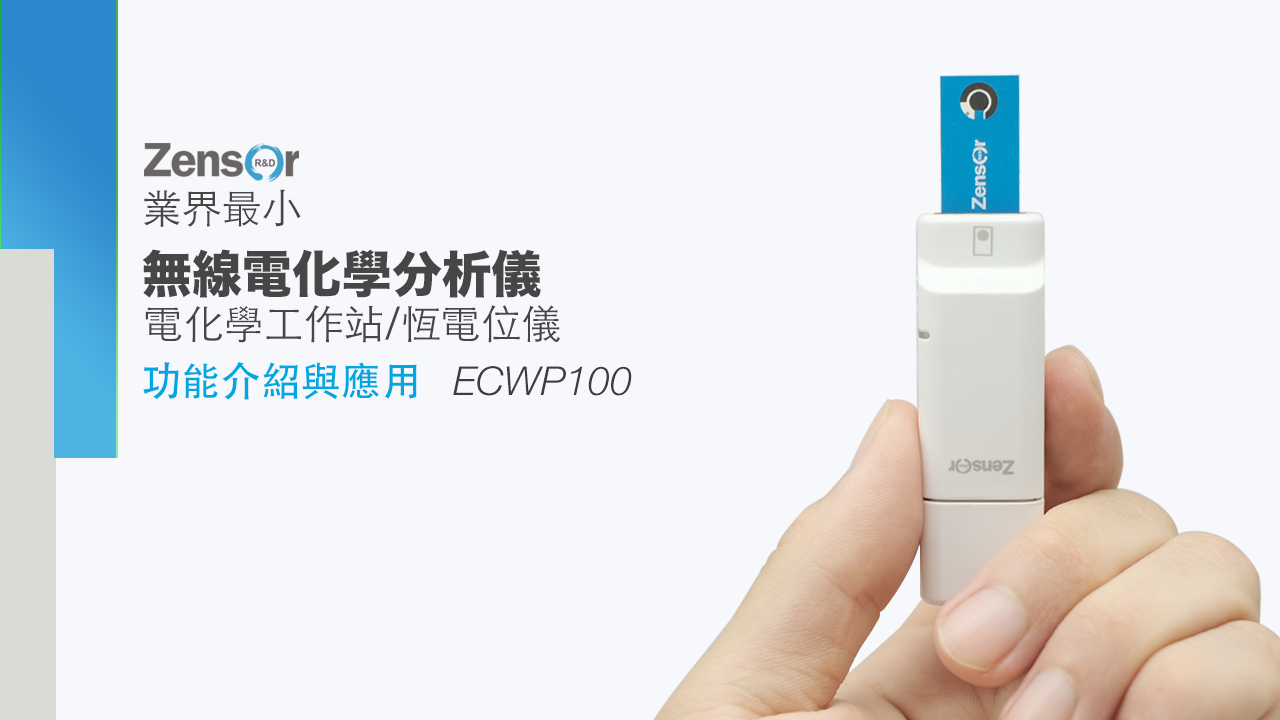
<style>
.page{position:relative;width:1280px;height:720px;background:#f7f8fc}
.page>*{position:absolute;margin:0}
.t1{font:40px "STHeitiTC-Light";color:#464646}
.t2{font:50px "HiraKakuStd-W8";color:#464646}
.t3{font:40px "STHeitiTC-Medium";color:#00a7e1}
.t4{font:40px "HelveticaNeueLTPro-LtIt";color:#3d3d3d}
</style>
<div class="page">
<p class="t1" style="left:143px;top:189px;width:158px;height:38px">業界最小</p>
<p class="t2" style="left:142px;top:249px;width:399px;height:49px">無線電化學分析儀</p>
<p class="t1" style="left:145px;top:305px;width:415px;height:38px">電化學工作站/恆電位儀</p>
<p class="t3" style="left:143px;top:362px;width:274px;height:38px">功能介紹與應用</p>
<p class="t4" style="left:453px;top:366px;width:179px;height:30px">ECWP100</p>
</div>
